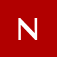
<style>
.page{position:relative;width:57px;height:57px;background:#b10000}
.page>*{position:absolute;margin:0}
.t1{font:48px "MoolBoran";color:#ffffff}
</style>
<div class="page">
<p class="t1" style="left:18px;top:18px;width:20px;height:22px">N</p>
</div>
